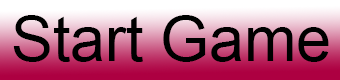
<style>
.page{position:relative;width:340px;height:80px}
.page>*{position:absolute;margin:0}
.t1{font:62.5px "ArialMT";color:#000000}
</style>
<div class="page">
<p class="t1" style="left:13px;top:15px;width:316px;height:47px">Start Game</p>
</div>
